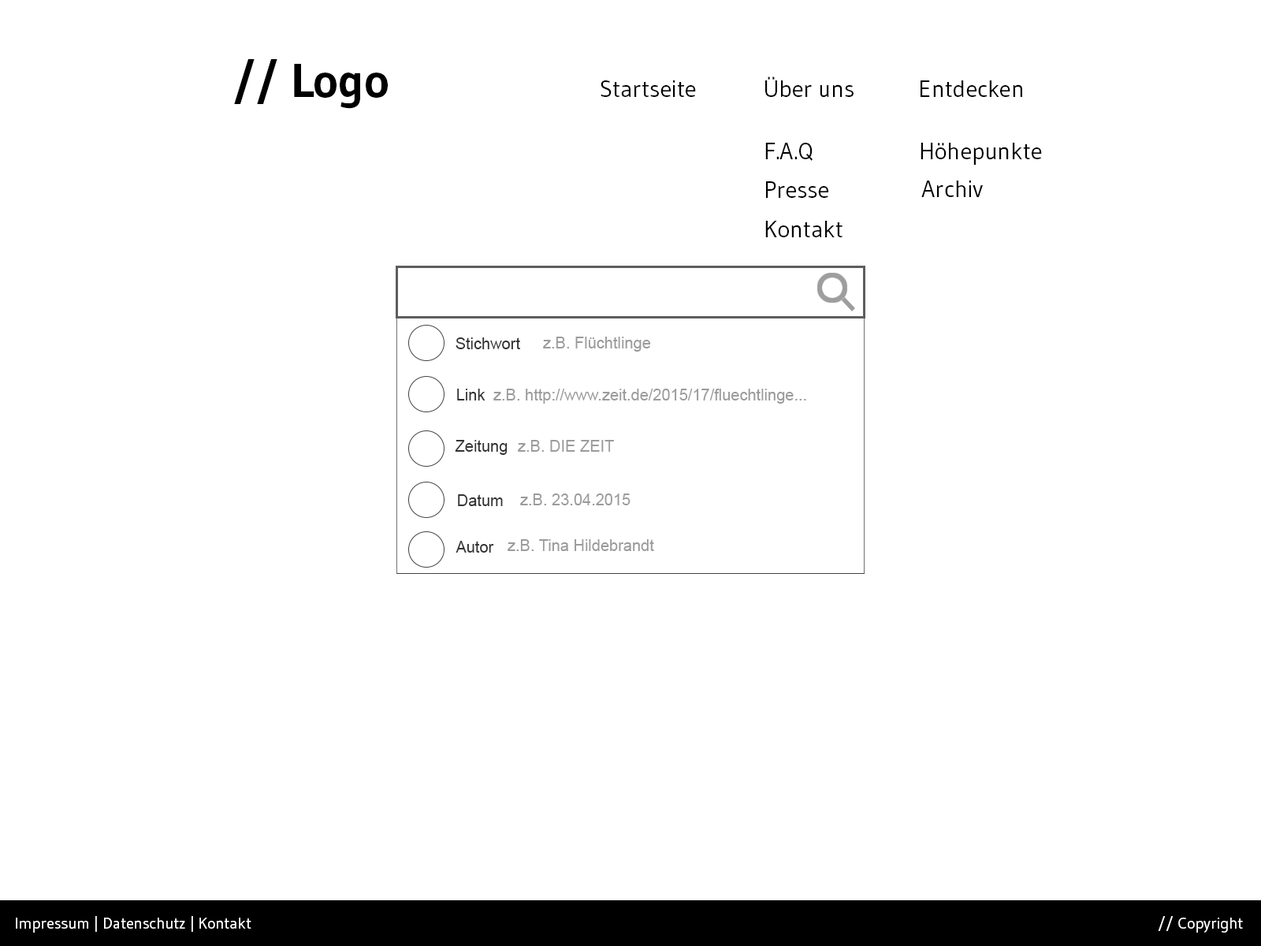
<style>
.page{position:relative;width:1261px;height:946px;background:#ffffff}
.page>*{position:absolute;margin:0}
.t1{font:47.3px "Gudea-Bold";color:#000000}
.t2{font:23.6px "Gudea";color:#000000}
.t3{font:15.8px "ArialMT";color:#343434}
.t4{font:15.8px "ArialMT";color:#9c9b9b}
.t5{font:15.8px "Gudea";color:#ffffff}
</style>
<div class="page">
<p class="t1" style="left:234px;top:59px;width:154px;height:50px">// Logo</p>
<p class="t2" style="left:765px;top:76px;width:88px;height:22px">Über uns</p>
<p class="t2" style="left:601px;top:80px;width:95px;height:17px">Startseite</p>
<p class="t2" style="left:920px;top:80px;width:102px;height:17px">Entdecken</p>
<p class="t2" style="left:765px;top:143px;width:48px;height:18px">F.A.Q</p>
<p class="t2" style="left:920px;top:143px;width:122px;height:22px">Höhepunkte</p>
<p class="t2" style="left:766px;top:181px;width:62px;height:17px">Presse</p>
<p class="t2" style="left:921px;top:180px;width:62px;height:17px">Archiv</p>
<p class="t2" style="left:765px;top:221px;width:77px;height:16px">Kontakt</p>
<p class="t3" style="left:456px;top:337px;width:64px;height:12px">Stichwort</p>
<p class="t4" style="left:543px;top:337px;width:108px;height:14px">z.B. Flüchtlinge</p>
<p class="t3" style="left:457px;top:389px;width:28px;height:11px">Link</p>
<p class="t4" style="left:493px;top:389px;width:313px;height:14px">z.B. http://www.zeit.de/2015/17/fluechtlinge...</p>
<p class="t3" style="left:455px;top:440px;width:53px;height:15px">Zeitung</p>
<p class="t4" style="left:518px;top:440px;width:96px;height:12px">z.B. DIE ZEIT</p>
<p class="t3" style="left:458px;top:494px;width:45px;height:12px">Datum</p>
<p class="t4" style="left:520px;top:493px;width:110px;height:12px">z.B. 23.04.2015</p>
<p class="t3" style="left:456px;top:541px;width:38px;height:11px">Autor</p>
<p class="t4" style="left:508px;top:539px;width:146px;height:12px">z.B. Tina Hildebrandt</p>
<p class="t5" style="left:16px;top:916px;width:235px;height:16px">Impressum | Datenschutz | Kontakt</p>
<p class="t5" style="left:1158px;top:916px;width:85px;height:16px">// Copyright</p>
</div>
